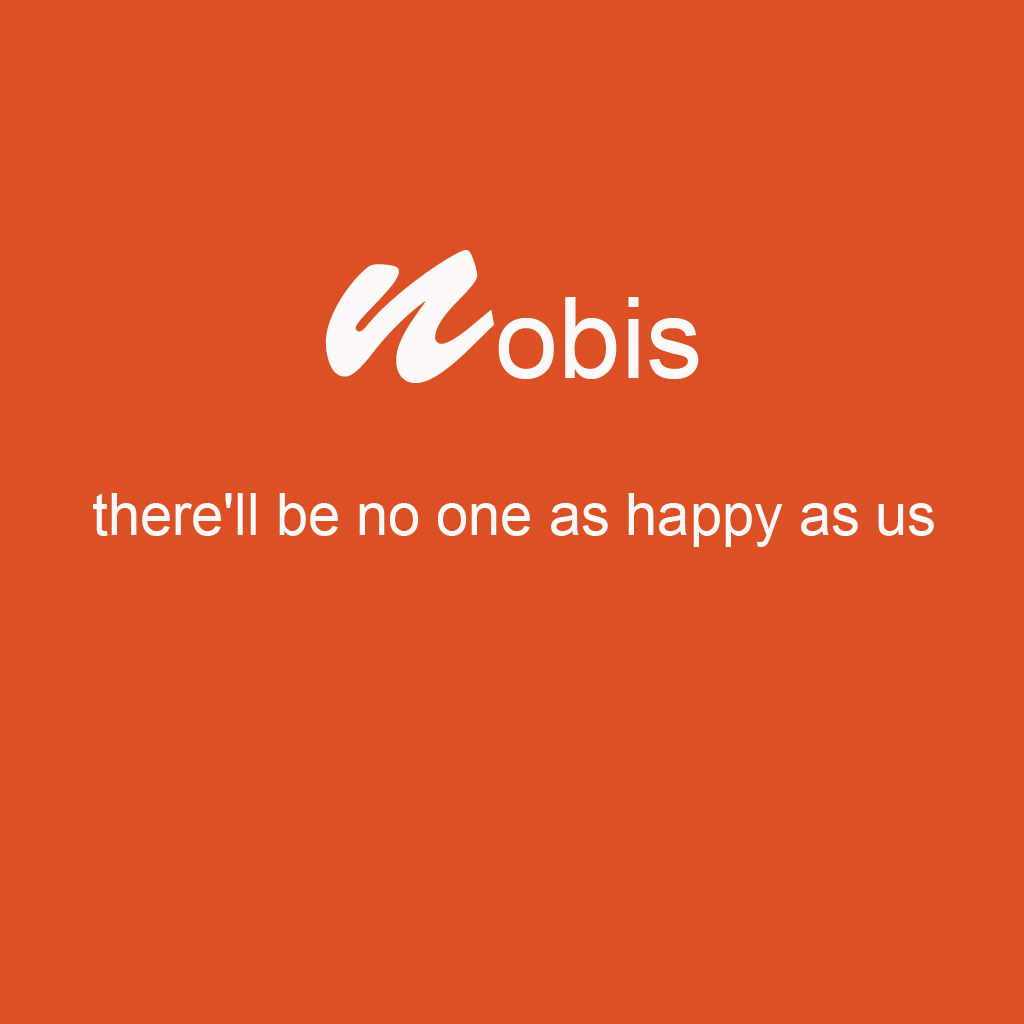
<style>
.page{position:relative;width:1024px;height:1024px;background:#db5125}
.page>*{position:absolute;margin:0}
.t1{font:113.1px "ArialMT";color:#fcf9f8}
.t2{font:342.8px "BrushScriptStd";letter-spacing:0.02em;color:#fcf9f8}
.t3{font:57.6px "ArialMT";color:#fcf9f8}
</style>
<div class="page">
<p class="t1" style="left:325px;top:250px;width:374px;height:133px"><span class="t2">n</span>obis</p>
<p class="t3" style="left:93px;top:493px;width:841px;height:54px">there'll be no one as happy as us</p>
</div>
